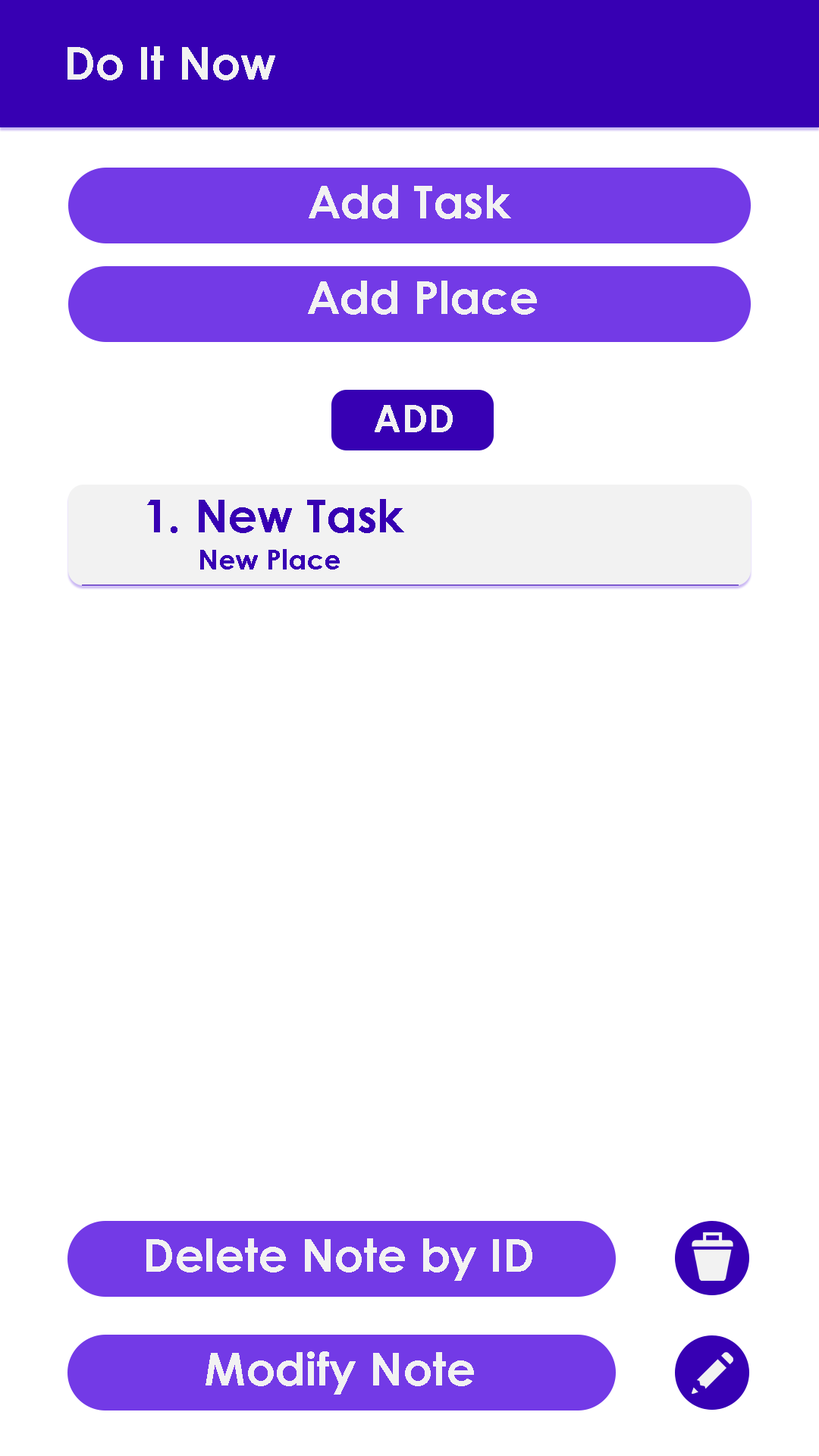
<style>
.page{position:relative;width:819px;height:1456px;background:#ffffff}
.page>*{position:absolute;margin:0}
.t1{font:45.5px "CenturyGothic-Bold";letter-spacing:0.005em;color:#f2f2f2}
.t2{font:37.9px "CenturyGothic-Bold";letter-spacing:0.005em;color:#f2f2f2}
.t3{font:45.5px "CenturyGothic-Bold";letter-spacing:0.005em;color:#3700b3}
.t4{font:27.3px "CenturyGothic-Bold";letter-spacing:0.005em;color:#3700b3}
</style>
<div class="page">
<p class="t1" style="left:67px;top:46px;width:208px;height:34px">Do It Now</p>
<p class="t1" style="left:309px;top:185px;width:202px;height:34px">Add Task</p>
<p class="t1" style="left:308px;top:281px;width:229px;height:34px">Add Place</p>
<p class="t2" style="left:375px;top:405px;width:78px;height:27px">ADD</p>
<p class="t3" style="left:147px;top:499px;width:257px;height:34px">1. New Task</p>
<p class="t4" style="left:200px;top:549px;width:140px;height:21px">New Place</p>
<p class="t1" style="left:146px;top:1238px;width:386px;height:43px">Delete Note by ID</p>
<p class="t1" style="left:206px;top:1351px;width:268px;height:44px">Modify Note</p>
</div>
